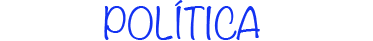
<style>
.page{position:relative;width:373px;height:41px;background:#ffffff}
.page>*{position:absolute;margin:0}
.t1{font:38.6px "Noteworthy-Light";color:#1332f2}
</style>
<div class="page">
<p class="t1" style="left:104px;top:0px;width:156px;height:40px">POLÍTICA</p>
</div>
